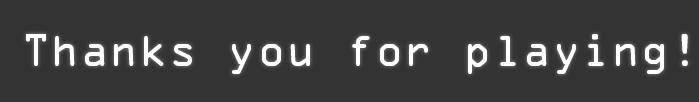
<style>
.page{position:relative;width:699px;height:102px;background:#333333}
.page>*{position:absolute;margin:0}
.t1{font:41px "OCRAStd";color:#ffffff}
</style>
<div class="page">
<p class="t1" style="left:26px;top:34px;width:662px;height:40px">Thanks you for playing!</p>
</div>
